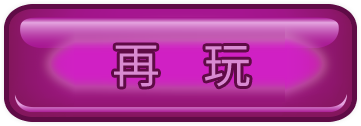
<style>
.page{position:relative;width:361px;height:126px}
.page>*{position:absolute;margin:0}
.t1{font:48px "SourceHanSansCN-Regular";color:#d98ad2}
</style>
<div class="page">
<p class="t1" style="left:114px;top:45px;width:136px;height:42px">再    玩</p>
</div>
